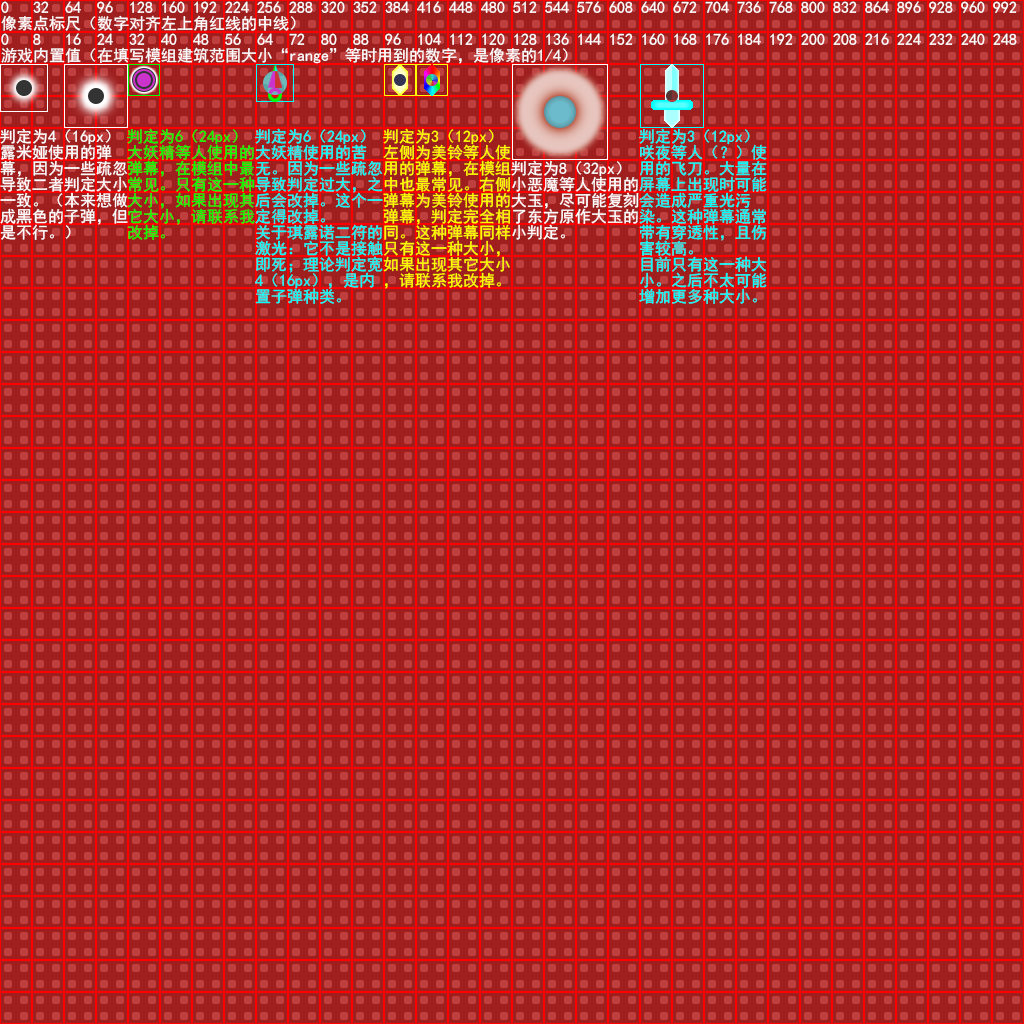
<style>
.page{position:relative;width:1024px;height:1024px;background:#bf3f3f}
.page>*{position:absolute;margin:0}
.t1{font:16px/16px "SimHei";color:#ffffff}
.t2{font:16px/16px "SimHei";color:#00ff00}
.t3{font:16px/16px "SimHei";color:#00ffff}
.t4{font:16px/16px "SimHei";color:#ffff00}
</style>
<div class="page">
<p class="t1" style="left:1px;top:1px;width:1016px;height:30px">0   32  64  96  128 160 192 224 256 288 320 352 384 416 448 480 512 544 576 608 640 672 704 736 768 800 832 864 896 928 960 992<br>像素点标尺（数字对齐左上角红线的中线）</p>
<p class="t1" style="left:1px;top:33px;width:1016px;height:31px">0   8   16  24  32  40  48  56  64  72  80  88  96  104 112 120 128 136 144 152 160 168 176 184 192 200 208 216 224 232 240 248<br>游戏内置值（在填写模组建筑范围大小“range”等时用到的数字，是像素的1/4）</p>
<p class="t1" style="left:0px;top:128px;width:128px;height:112px">判定为4（16px）<br>露米娅使用的弹<br>幕，因为一些疏忽<br>导致二者判定大小<br>一致。（本来想做<br>成黑色的子弹，但<br>是不行。）</p>
<p class="t2" style="left:127px;top:128px;width:128px;height:112px">判定为6（24px）<br>大妖精等人使用的<br>弹幕，在模组中最<br>常见。只有这一种大小，如果出现其它大小，请联系我改掉。</p>
<p class="t3" style="left:255px;top:128px;width:128px;height:176px">判定为6（24px）<br>大妖精使用的苦<br>无。因为一些疏忽导致判定过大，之后会改掉。这个一定得改掉。<br>关于琪露诺二符的激光：它不是接触即死；理论判定宽4（16px），是内置子弹种类。</p>
<p class="t4" style="left:383px;top:128px;width:128px;height:161px">判定为3（12px）<br>左侧为美铃等人使用的弹幕，在模组中也最常见。右侧弹幕为美铃使用的弹幕，判定完全相同。这种弹幕同样只有这一种大小，如果出现其它大小，请联系我改掉。</p>
<p class="t3" style="left:639px;top:128px;width:128px;height:176px">判定为3（12px）<br>咲夜等人（？）使用的飞刀。大量在屏幕上出现时可能会造成严重光污<br>染。这种弹幕通常带有穿透性，且伤害较高。<br>目前只有这一种大小。之后不太可能增加更多种大小。</p>
<p class="t1" style="left:511px;top:160px;width:128px;height:80px">判定为8（32px）<br>小恶魔等人使用的大玉，尽可能复刻了东方原作大玉的小判定。</p>
</div>
